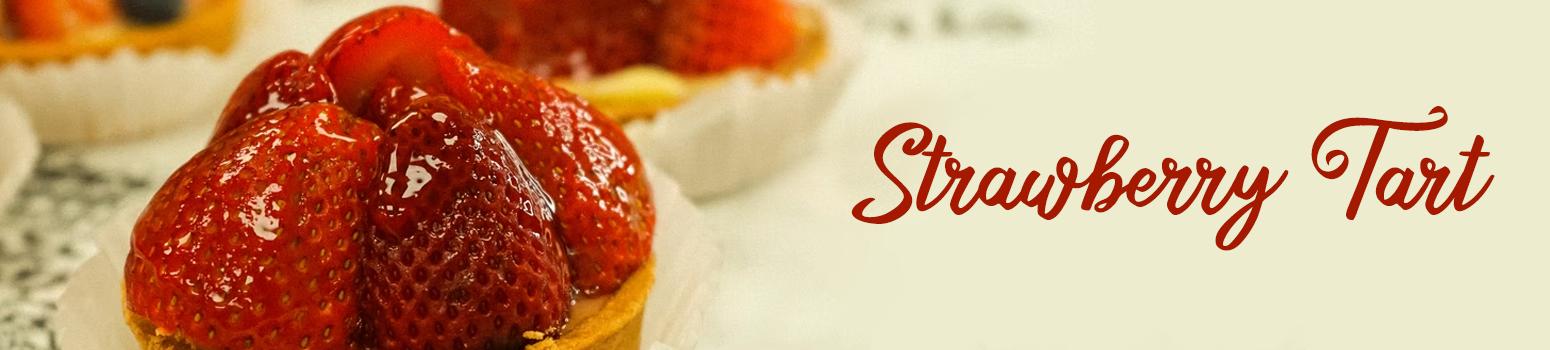
<style>
.page{position:relative;width:1550px;height:350px;background:#edeccf}
.page>*{position:absolute;margin:0}
.t1{font:107.8px "SweetsDelightDEMO";letter-spacing:-0.02em;color:#a41900;font-weight:bold}
</style>
<div class="page">
<p class="t1" style="left:851px;top:106px;width:644px;height:145px">Strawberry Tart</p>
</div>
